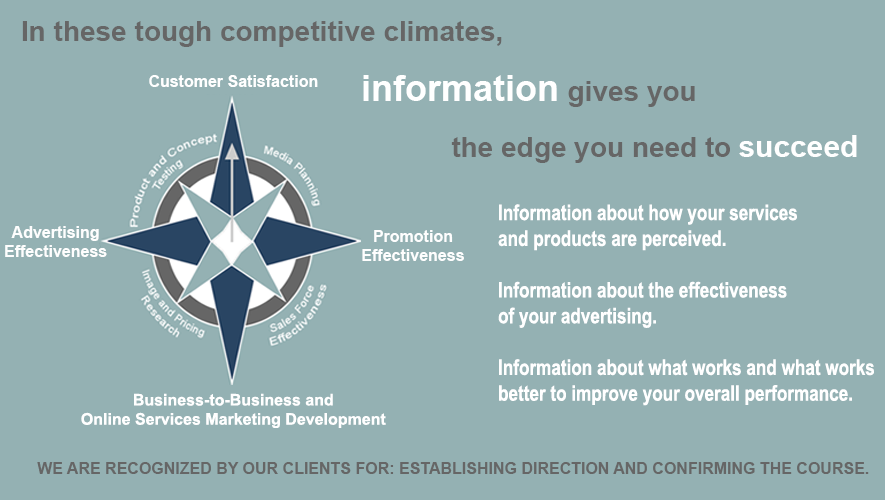
<style>
.page{position:relative;width:885px;height:500px;background:#94b1b3}
.page>*{position:absolute;margin:0}
.t1{font:28px "Arial-BoldMT";color:#666666}
.t2{font:16px "Arial-BoldMT";color:#ffffff}
.t3{font:36px "Arial-BoldMT";color:#ffffff}
.t4{font:21.5px "Arial-BoldMT";color:#ffffff;scale:0.8 1}
.t5{font:16px "Arial-BoldMT";color:#fefefe}
.t6{font:16px "Arial-BoldMT";color:#666666}
</style>
<div class="page">
<p class="t1" style="left:22px;top:21px;width:480px;height:26px">In these tough competitive climates,</p>
<p class="t2" style="left:149px;top:75px;width:169px;height:12px">Customer Satisfaction</p>
<p class="t3" style="left:363px;top:75px;width:332px;height:32px">information <span class="t1">gives you</span></p>
<p class="t4" style="left:498px;top:204px;width:376px;height:202px">Information about how your services<br>and products are perceived.<br><br>Information about the effectiveness<br>of your advertising.<br><br>Information about what works and what works<br>better to improve your overall performance.</p>
<p class="t5" style="left:5px;top:226px;width:102px;height:31px;text-align:center">Advertising<br>Effectiveness</p>
<p class="t5" style="left:362px;top:230px;width:102px;height:31px;text-align:center">Promotion<br>Effectiveness</p>
<p class="t2" style="left:81px;top:393px;width:305px;height:35px;text-align:center">Business-to-Business and<br>Online Services Marketing Development</p>
<p class="t6" style="left:37px;top:462px;width:832px;height:12px">WE ARE RECOGNIZED BY OUR CLIENTS FOR: ESTABLISHING DIRECTION AND CONFIRMING THE COURSE.</p>
</div>
